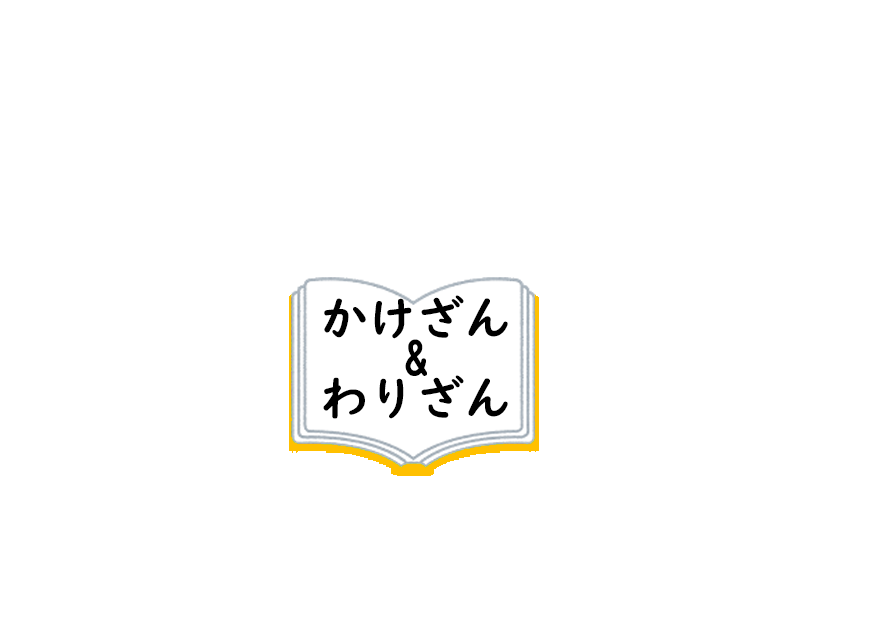
<style>
.page{position:relative;width:880px;height:640px;background:#ffffff}
.page>*{position:absolute;margin:0}
.t1{font:48px/40px "UDDigiKyokashoN-B";color:#000000}
</style>
<div class="page">
<p class="t1" style="left:323px;top:295px;width:185px;height:124px;text-align:center">かけざん<br>&amp;<br>わりざん</p>
</div>
